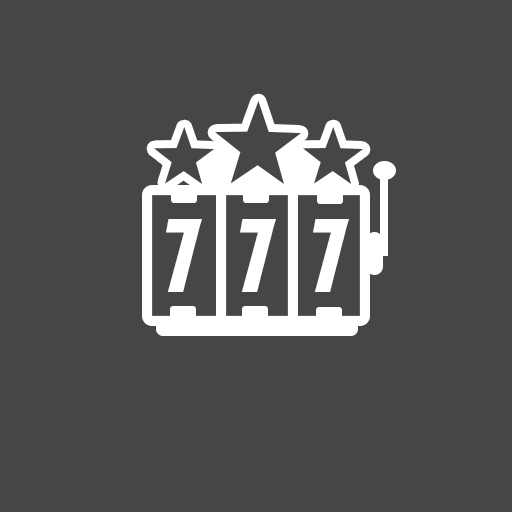
<style>
.page{position:relative;width:512px;height:512px;background:#464646}
.page>*{position:absolute;margin:0}
.t1{font:100px "AmericanCaptain";color:#ffffff}
</style>
<div class="page">
<p class="t1" style="left:166px;top:219px;width:36px;height:73px">7</p>
<p class="t1" style="left:240px;top:219px;width:36px;height:73px">7</p>
<p class="t1" style="left:313px;top:219px;width:36px;height:73px">7</p>
</div>
